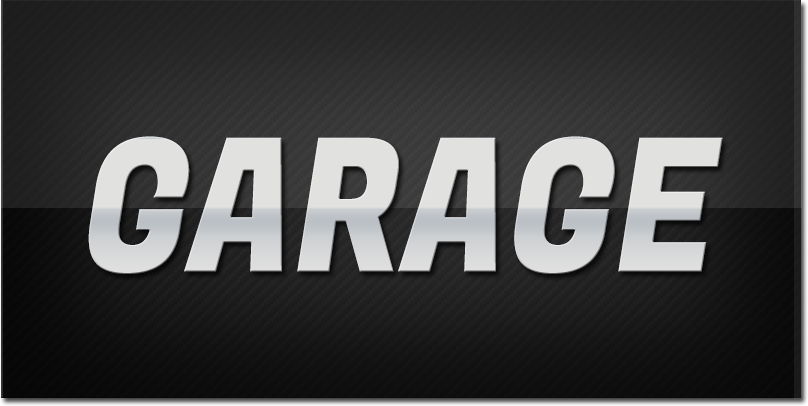
<style>
.page{position:relative;width:808px;height:406px}
.page>*{position:absolute;margin:0}
.t1{font:185.2px "FugazOne-Regular";color:#dfdfdf;scale:0.89 1}
</style>
<div class="page">
<p class="t1" style="left:88px;top:136px;width:635px;height:138px">GARAGE</p>
</div>
